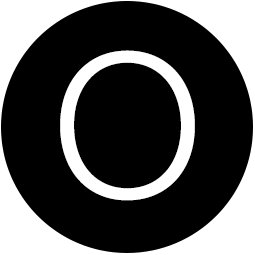
<style>
.page{position:relative;width:255px;height:255px;background:#000000}
.page>*{position:absolute;margin:0}
.t1{font:200.4px "HelveticaNeueCyr-Light";color:#ffffff}
</style>
<div class="page">
<p class="t1" style="left:60px;top:50px;width:135px;height:151px">O</p>
</div>
